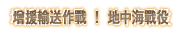
<style>
.page{position:relative;width:179px;height:33px;background:#ffffff}
.page>*{position:absolute;margin:0}
.t1{font:18.4px "GothicMB101Pr6N-Medium";font-weight:bold;scale:0.67 1}
.t2{font:15px "GothicMB101Pr6N-Medium";color:#836d55;font-weight:bold;scale:0.8 1}
</style>
<div class="page">
<p class="t1" style="left:10px;top:8px;width:162px;height:18px">增援輸送作戰 ！ 地中海戰役</p>
<p class="t2" style="left:13px;top:9px;width:156px;height:16px">增援輸送作戰 ！ 地中海戰役</p>
</div>
